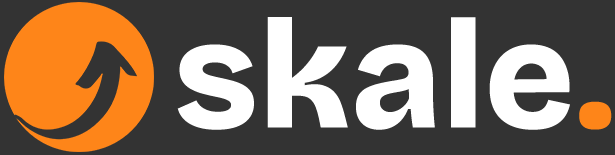
<style>
.page{position:relative;width:615px;height:155px;background:#333333}
.page>*{position:absolute;margin:0}
.t1{font:153px "BricolageGrotesque-ExtraBold";color:#ffffff}
.t2{font:153px "BricolageGrotesque-ExtraBold";color:#fe8519}
</style>
<div class="page">
<p class="t1" style="left:177px;top:17px;width:435px;height:113px">skale<span class="t2">.</span></p>
</div>
